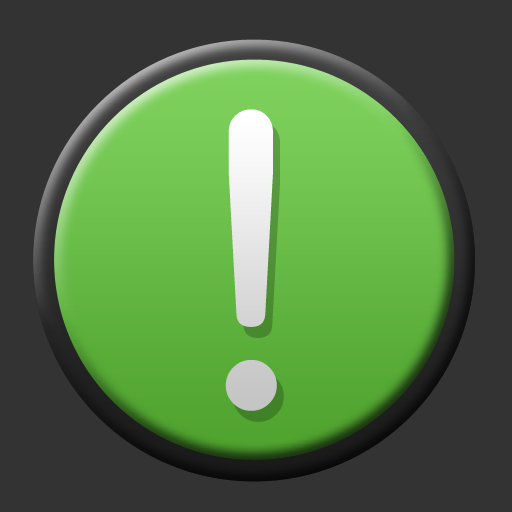
<style>
.page{position:relative;width:512px;height:512px;background:#333333}
.page>*{position:absolute;margin:0}
.t1{font:425.8px "VarelaRound-Regular";color:#e9e9e9}
</style>
<div class="page">
<p class="t1" style="left:225px;top:109px;width:52px;height:302px">!</p>
</div>
